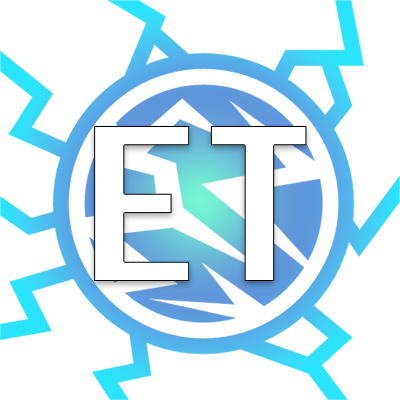
<style>
.page{position:relative;width:400px;height:400px;background:#ffffff}
.page>*{position:absolute;margin:0}
.t1{font:191.7px "Unispace-Bold";color:#ffffff}
</style>
<div class="page">
<p class="t1" style="left:94px;top:126px;width:213px;height:155px">ET</p>
</div>
